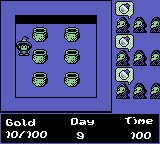
<style>
.page{position:relative;width:160px;height:144px;background:#5d5fc0}
.page>*{position:absolute;margin:0}
.t1{font:7px "Wayfarer's-Toy-Box";color:#ffffff}
</style>
<div class="page">
<p class="t1" style="left:6px;top:119px;width:29px;height:7px">Gold</p>
<p class="t1" style="left:71px;top:118px;width:23px;height:7px">Day</p>
<p class="t1" style="left:125px;top:117px;width:28px;height:7px">Time</p>
<p class="t1" style="left:5px;top:131px;width:42px;height:7px">10/100</p>
<p class="t1" style="left:76px;top:132px;width:8px;height:7px">9</p>
<p class="t1" style="left:130px;top:132px;width:21px;height:7px">100</p>
</div>
